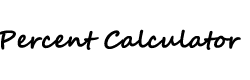
<style>
.page{position:relative;width:250px;height:80px;background:#ffffff}
.page>*{position:absolute;margin:0}
.t1{font:24px "SegoeScript-Bold";color:#000000}
</style>
<div class="page">
<p class="t1" style="left:0px;top:29px;width:241px;height:21px">Percent Calculator</p>
</div>
